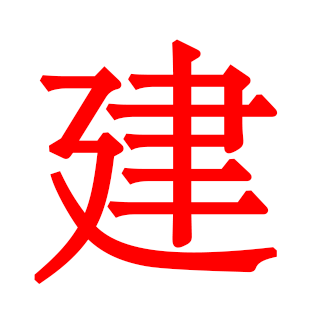
<style>
.page{position:relative;width:320px;height:320px;background:#ffffff}
.page>*{position:absolute;margin:0}
.t1{font:250px "AdobeSongStd-Light";letter-spacing:0.2em;color:#ff0000;font-weight:bold}
</style>
<div class="page">
<p class="t1" style="left:34px;top:39px;width:244px;height:246px">建</p>
</div>
